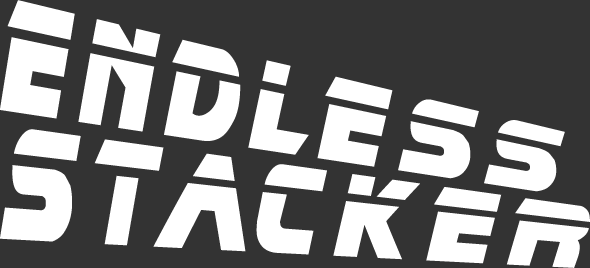
<style>
.page{position:relative;width:590px;height:268px;background:#333333}
.page>*{position:absolute;margin:0}
.t1{font:110.4px/86px "BladeRunnerMovieFont";letter-spacing:0.12em;color:#ffffff;scale:0.87 1}
</style>
<div class="page">
<p class="t1" style="left:0px;top:0px;width:590px;height:268px">endless<br>stacker</p>
</div>
